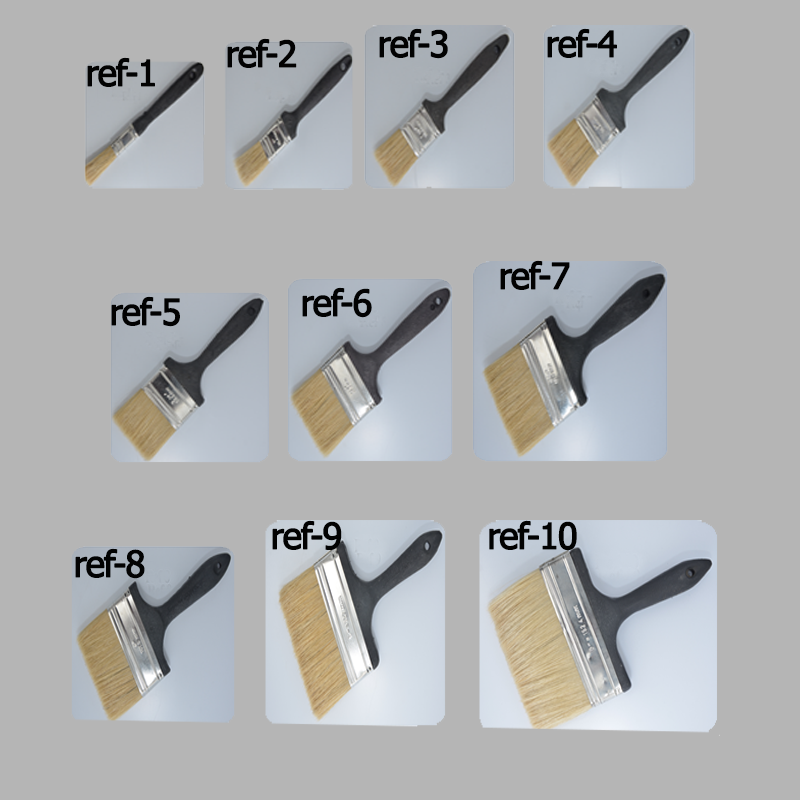
<style>
.page{position:relative;width:800px;height:800px;background:#b5b5b5}
.page>*{position:absolute;margin:0}
.t1{font:36px "Tahoma";letter-spacing:-0.05em;color:#020202;font-weight:bold}
</style>
<div class="page">
<p class="t1" style="left:379px;top:28px;width:69px;height:31px">ref-3</p>
<p class="t1" style="left:547px;top:28px;width:70px;height:30px">ref-4</p>
<p class="t1" style="left:227px;top:38px;width:70px;height:30px">ref-2</p>
<p class="t1" style="left:87px;top:57px;width:68px;height:30px">ref-1</p>
<p class="t1" style="left:500px;top:260px;width:70px;height:30px">ref-7</p>
<p class="t1" style="left:302px;top:287px;width:70px;height:31px">ref-6</p>
<p class="t1" style="left:111px;top:296px;width:69px;height:31px">ref-5</p>
<p class="t1" style="left:272px;top:520px;width:70px;height:30px">ref-9</p>
<p class="t1" style="left:489px;top:520px;width:88px;height:31px">ref-10</p>
<p class="t1" style="left:75px;top:548px;width:70px;height:31px">ref-8</p>
</div>
